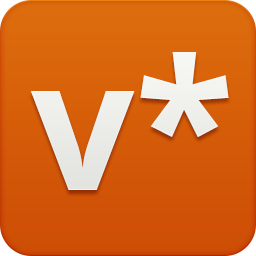
<style>
.page{position:relative;width:256px;height:256px}
.page>*{position:absolute;margin:0}
.t1{font:181.5px "OpenSans-Bold";color:#f6f7f2}
</style>
<div class="page">
<p class="t1" style="left:31px;top:52px;width:198px;height:138px">v*</p>
</div>
